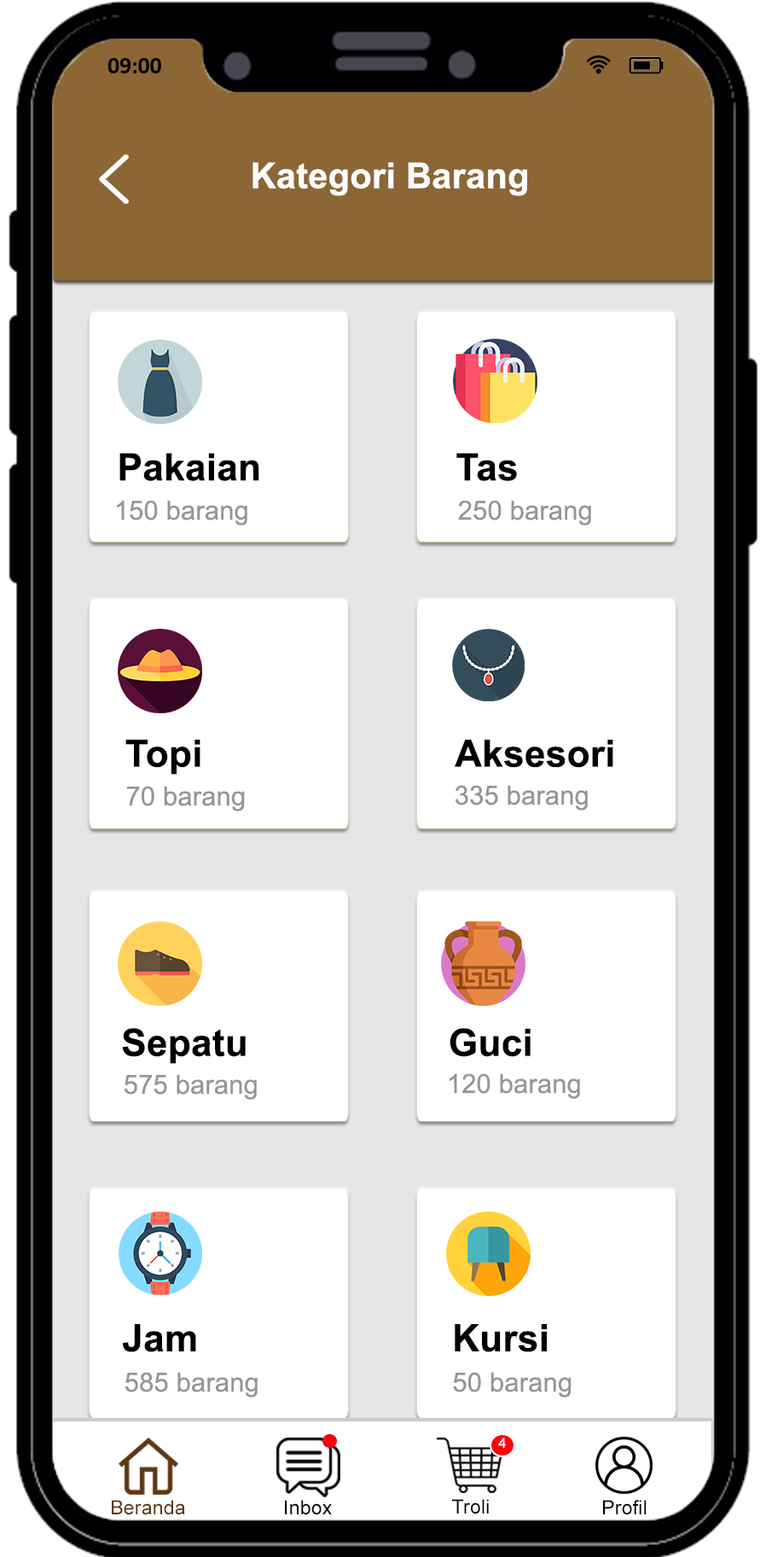
<style>
.page{position:relative;width:766px;height:1557px;background:#ffffff}
.page>*{position:absolute;margin:0}
.t1{font:23.6px "Calibri-Bold";color:#000000}
.t2{font:35.5px "Arial-BoldMT";letter-spacing:0.005em;color:#ffffff}
.t3{font:37.8px "Arial-BoldMT";letter-spacing:0.005em;color:#000000}
.t4{font:26.4px "ArialMT";letter-spacing:0.005em;color:#959595}
.t5{font:14.2px "ArialMT";letter-spacing:0.01em;color:#ffffff}
.t6{font:19.6px "ArialMT";letter-spacing:0.01em;color:#603813}
.t7{font:19.6px "ArialMT";letter-spacing:0.01em;color:#000000}
</style>
<div class="page">
<p class="t1" style="left:107px;top:58px;width:54px;height:15px">09:00</p>
<p class="t2" style="left:252px;top:162px;width:275px;height:34px">Kategori Barang</p>
<p class="t3" style="left:119px;top:453px;width:140px;height:28px">Pakaian</p>
<p class="t3" style="left:456px;top:453px;width:61px;height:28px">Tas</p>
<p class="t4" style="left:117px;top:500px;width:130px;height:25px">150 barang</p>
<p class="t4" style="left:458px;top:500px;width:133px;height:25px">250 barang</p>
<p class="t3" style="left:125px;top:740px;width:75px;height:35px">Topi</p>
<p class="t3" style="left:455px;top:740px;width:158px;height:28px">Aksesori</p>
<p class="t4" style="left:126px;top:786px;width:119px;height:25px">70 barang</p>
<p class="t4" style="left:456px;top:785px;width:132px;height:25px">335 barang</p>
<p class="t3" style="left:122px;top:1028px;width:124px;height:36px">Sepatu</p>
<p class="t3" style="left:450px;top:1028px;width:81px;height:29px">Guci</p>
<p class="t4" style="left:125px;top:1074px;width:132px;height:26px">575 barang</p>
<p class="t4" style="left:450px;top:1073px;width:130px;height:26px">120 barang</p>
<p class="t3" style="left:123px;top:1324px;width:73px;height:28px">Jam</p>
<p class="t3" style="left:455px;top:1324px;width:92px;height:28px">Kursi</p>
<p class="t4" style="left:125px;top:1372px;width:133px;height:25px">585 barang</p>
<p class="t4" style="left:453px;top:1372px;width:119px;height:25px">50 barang</p>
<p class="t5" style="left:498px;top:1437px;width:8px;height:11px">4</p>
<p class="t6" style="left:112px;top:1500px;width:73px;height:15px">Beranda</p>
<p class="t7" style="left:285px;top:1500px;width:47px;height:15px">Inbox</p>
<p class="t7" style="left:452px;top:1499px;width:37px;height:15px">Troli</p>
<p class="t7" style="left:603px;top:1500px;width:44px;height:15px">Profil</p>
</div>
